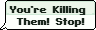
<style>
.page{position:relative;width:96px;height:30px;background:#fcfffb}
.page>*{position:absolute;margin:0}
.t1{font:10px "SFPixelate-Bold";color:#1b281e}
</style>
<div class="page">
<p class="t1" style="left:9px;top:6px;width:76px;height:21px;text-align:center">You’re Killing <br>Them! Stop!</p>
<p class="t1" style="left:10px;top:6px;width:76px;height:21px;text-align:center">You’re Killing <br>Them! Stop!</p>
</div>
